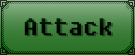
<style>
.page{position:relative;width:135px;height:55px}
.page>*{position:absolute;margin:0}
.t1{font:24px "Fixedsys";color:#000000}
</style>
<div class="page">
<p class="t1" style="left:24px;top:18px;width:87px;height:18px">Attack</p>
</div>
